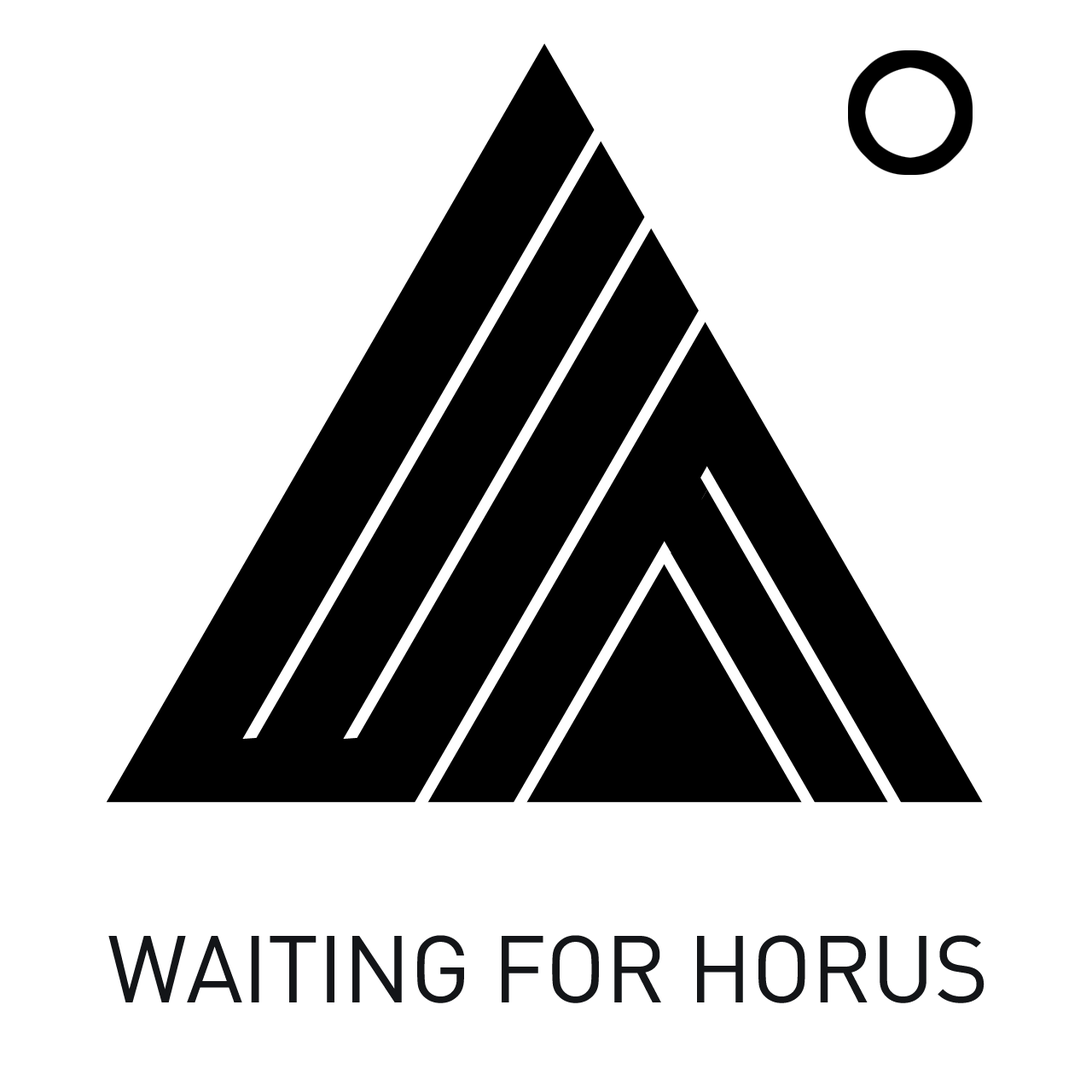
<style>
.page{position:relative;width:1092px;height:1092px;background:#ffffff}
.page>*{position:absolute;margin:0}
.t1{font:93.2px "DIN";letter-spacing:-0.01em;color:#131518}
</style>
<div class="page">
<p class="t1" style="left:108px;top:935px;width:876px;height:68px">WAITING FOR HORUS</p>
</div>
